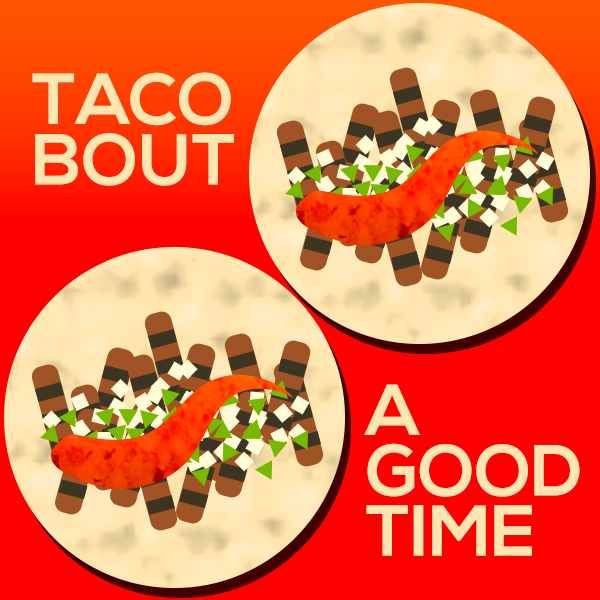
<style>
.page{position:relative;width:600px;height:600px;background:#ff0000}
.page>*{position:absolute;margin:0}
.t1{font:72px/60.4px "NexaBold";color:#ffe6b0;text-transform:uppercase}
</style>
<div class="page">
<p class="t1" style="left:32px;top:72px;width:202px;height:114px">Taco <br>Bout</p>
<p class="t1" style="left:364px;top:384px;width:216px;height:172px">A<br>GOOD<br>TImE</p>
</div>
